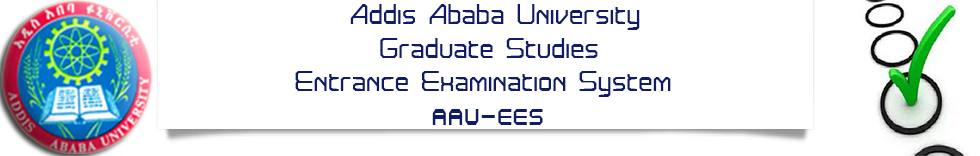
<style>
.page{position:relative;width:980px;height:156px;background:#ffffff}
.page>*{position:absolute;margin:0}
.t1{font:28px "Astrolyte";color:#101c68;scale:0.85 1}
.t2{font:28px "Atmosphere";color:#101c68;scale:0.85 1}
</style>
<div class="page">
<p class="t1" style="left:295px;top:4px;width:376px;height:121px;text-align:center">Addis Ababa University <br>Graduate Studies<br> Entrance Examination System<br><span class="t2">AAU-EES</span></p>
</div>
